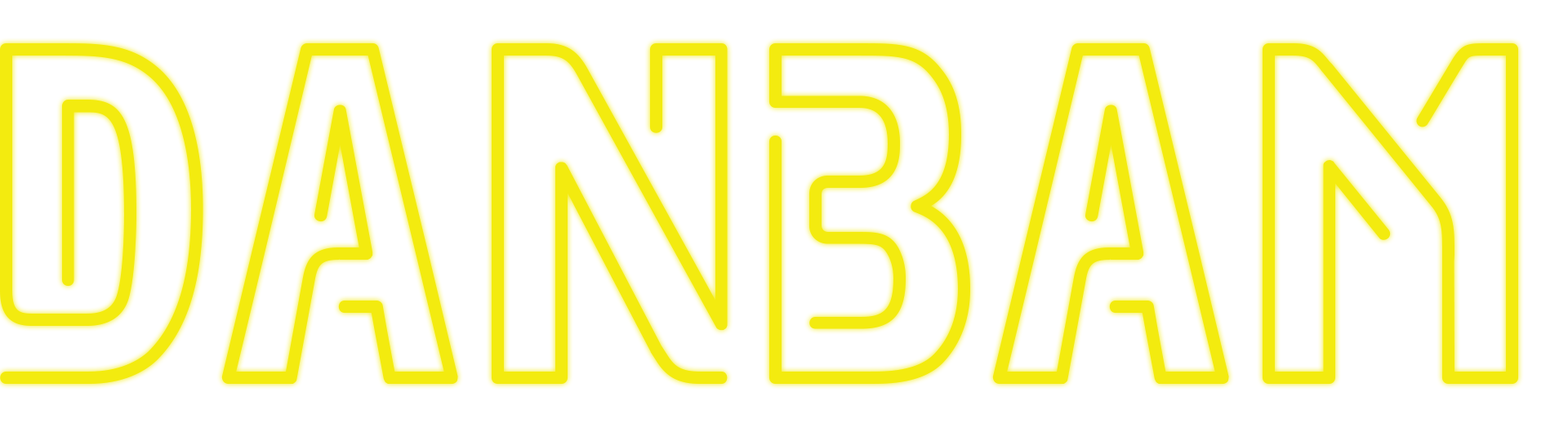
<style>
.page{position:relative;width:1568px;height:441px;background:#ffffff}
.page>*{position:absolute;margin:0}
.t1{font:426.2px "Neoneon";color:#f3eb0f}
</style>
<div class="page">
<p class="t1" style="left:0px;top:43px;width:1518px;height:341px">DanBam</p>
</div>
